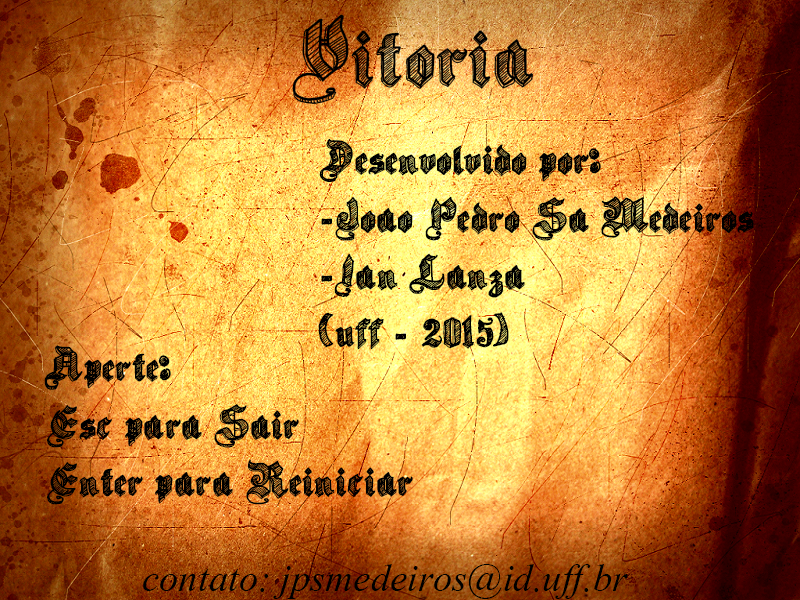
<style>
.page{position:relative;width:800px;height:600px}
.page>*{position:absolute;margin:0}
.t1{font:96px "SketchGothicSchool";color:#000000}
.t2{font:48px "SketchGothicSchool";color:#000000}
.t3{font:48px "Vijaya";color:#000000}
</style>
<div class="page">
<p class="t1" style="left:292px;top:14px;width:242px;height:90px">Vitoria</p>
<p class="t2" style="left:318px;top:139px;width:436px;height:211px">Desenvolvido por:<br>-Joao Pedro Sa Medeiros<br>-Ian Lanza<br>(uff - 2015)</p>
<p class="t3" style="left:143px;top:564px;width:485px;height:35px">contato: jpsmedeiros@id.uff.br</p>
</div>
